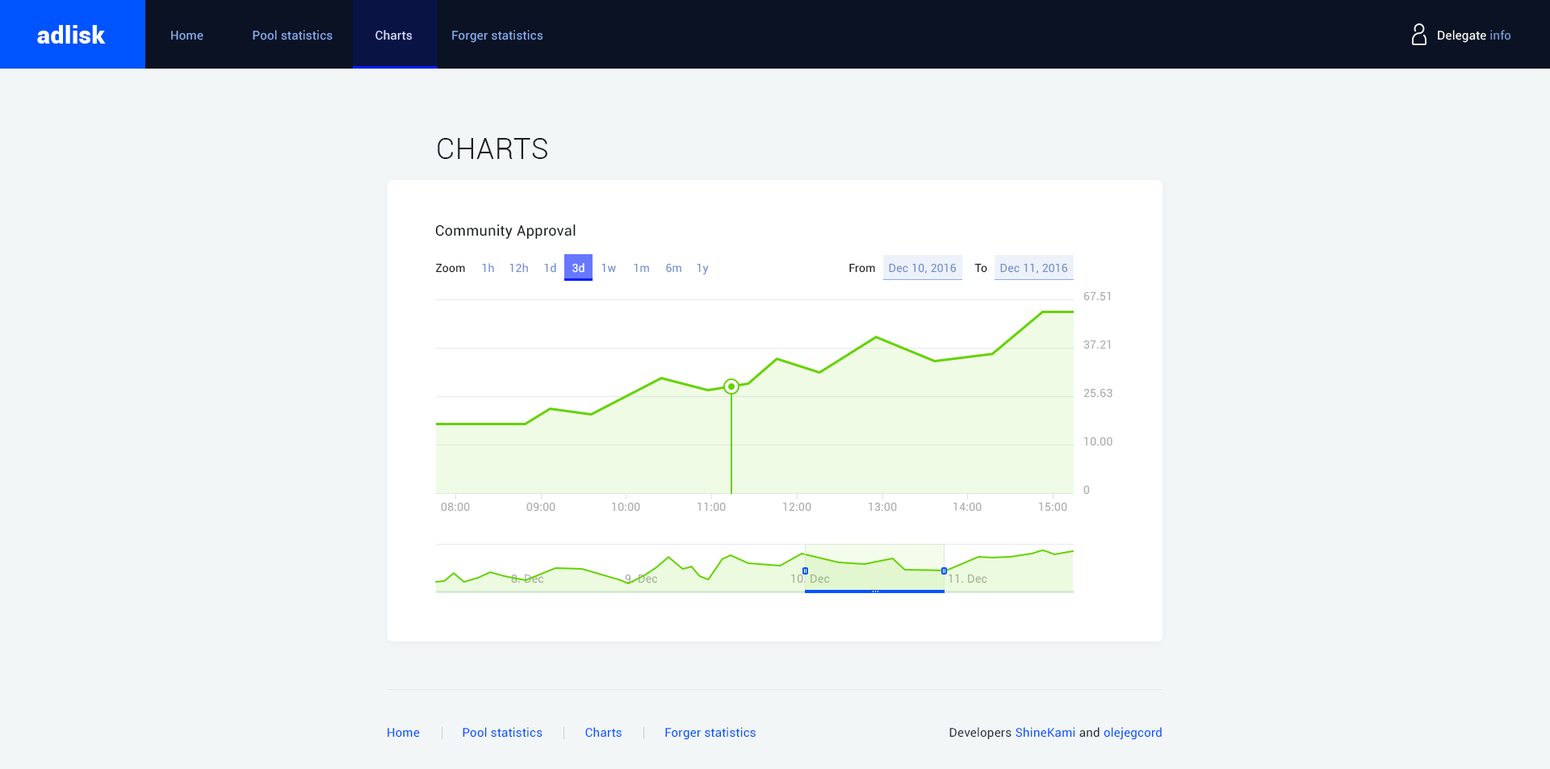
<style>
.page{position:relative;width:1550px;height:769px;background:#f3f6f7}
.page>*{position:absolute;margin:0}
.t1{font:24.2px "Roboto-Black";letter-spacing:0.02em;color:#ffffff}
.t2{font:12.1px "Roboto-Regular";letter-spacing:0.02em;color:#88abf0}
.t3{font:12.1px "Roboto-Regular";letter-spacing:0.02em;color:#ffffff}
.t4{font:12.1px "Roboto-Regular";letter-spacing:0.02em;color:#f3f6f7}
.t5{font:12.1px "Roboto-Regular";letter-spacing:0.02em;color:#7695d2}
.t6{font:29.1px "Roboto-Light";letter-spacing:0.02em;color:#191d1f;text-transform:uppercase}
.t7{font:14.5px "Roboto-Regular";letter-spacing:0.02em;color:#191d1f}
.t8{font:11.3px "Roboto-Regular";letter-spacing:0.02em;color:#191d1f}
.t9{font:11.3px "Roboto-Regular";letter-spacing:0.02em;color:#7492cc}
.t10{font:11.3px "Roboto-Regular";letter-spacing:0.02em;color:#ffffff}
.t11{font:11.3px "Roboto-Regular";letter-spacing:0.02em;color:#aeaeae}
.t12{font:11.3px "Roboto-Regular";letter-spacing:0.02em;color:#a0b48e}
.t13{font:12.1px "Roboto-Regular";letter-spacing:0.02em;color:#0054ff}
.t14{font:12.1px "Roboto-Regular";letter-spacing:0.02em;color:#263238}
</style>
<div class="page">
<p class="t1" style="left:37px;top:25px;width:69px;height:19px">adlisk</p>
<p class="t2" style="left:171px;top:30px;width:372px;height:13px">Home               Pool statistics           <span class="t3">  Charts </span>           Forger statistics</p>
<p class="t4" style="left:1438px;top:30px;width:73px;height:13px">Delegate <span class="t5">info</span></p>
<p class="t6" style="left:438px;top:138px;width:109px;height:21px">Charts</p>
<p class="t7" style="left:435px;top:224px;width:141px;height:15px">Community Approval</p>
<p class="t8" style="left:436px;top:263px;width:29px;height:10px">Zoom</p>
<p class="t9" style="left:482px;top:263px;width:12px;height:10px">1h</p>
<p class="t9" style="left:509px;top:263px;width:19px;height:10px">12h</p>
<p class="t9" style="left:544px;top:263px;width:12px;height:10px">1d</p>
<p class="t10" style="left:572px;top:263px;width:12px;height:10px">3d</p>
<p class="t9" style="left:601px;top:263px;width:15px;height:10px">1w</p>
<p class="t9" style="left:634px;top:263px;width:15px;height:10px">1m</p>
<p class="t9" style="left:666px;top:263px;width:15px;height:10px">6m</p>
<p class="t9" style="left:697px;top:263px;width:12px;height:12px">1y</p>
<p class="t8" style="left:849px;top:263px;width:26px;height:10px">From</p>
<p class="t9" style="left:889px;top:263px;width:68px;height:11px">Dec 10, 2016</p>
<p class="t8" style="left:974px;top:263px;width:13px;height:10px">To</p>
<p class="t9" style="left:1000px;top:263px;width:68px;height:11px">Dec 11, 2016</p>
<p class="t11" style="left:1083px;top:291px;width:28px;height:10px">67.51</p>
<p class="t11" style="left:1083px;top:340px;width:28px;height:10px">37.21</p>
<p class="t11" style="left:1083px;top:388px;width:29px;height:10px">25.63</p>
<p class="t11" style="left:1084px;top:437px;width:28px;height:9px">10.00</p>
<p class="t11" style="left:1083px;top:485px;width:7px;height:10px">0</p>
<p class="t11" style="left:441px;top:502px;width:29px;height:10px">08:00</p>
<p class="t11" style="left:526px;top:502px;width:29px;height:10px">09:00</p>
<p class="t11" style="left:612px;top:502px;width:28px;height:10px">10:00</p>
<p class="t11" style="left:697px;top:502px;width:29px;height:10px">11:00</p>
<p class="t11" style="left:783px;top:502px;width:28px;height:10px">12:00</p>
<p class="t11" style="left:869px;top:502px;width:28px;height:10px">13:00</p>
<p class="t11" style="left:953px;top:502px;width:29px;height:10px">14:00</p>
<p class="t11" style="left:1039px;top:502px;width:28px;height:10px">15:00</p>
<p class="t11" style="left:511px;top:574px;width:33px;height:10px">8. Dec</p>
<p class="t11" style="left:625px;top:574px;width:33px;height:10px">9. Dec</p>
<p class="t12" style="left:791px;top:574px;width:39px;height:10px">10. Dec</p>
<p class="t11" style="left:949px;top:574px;width:38px;height:10px">11. Dec</p>
<p class="t13" style="left:387px;top:727px;width:369px;height:13px">Home             Pool statistics             Charts             Forger statistics</p>
<p class="t14" style="left:949px;top:727px;width:213px;height:13px">Developers <span class="t13">ShineKami</span> and <span class="t13">olejegcord</span></p>
</div>
